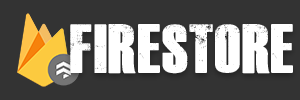
<style>
.page{position:relative;width:300px;height:100px;background:#333333}
.page>*{position:absolute;margin:0}
.t1{font:48px "DeadKansas";color:#ffffff}
</style>
<div class="page">
<p class="t1" style="left:70px;top:24px;width:223px;height:50px">FIRESTORE</p>
</div>
